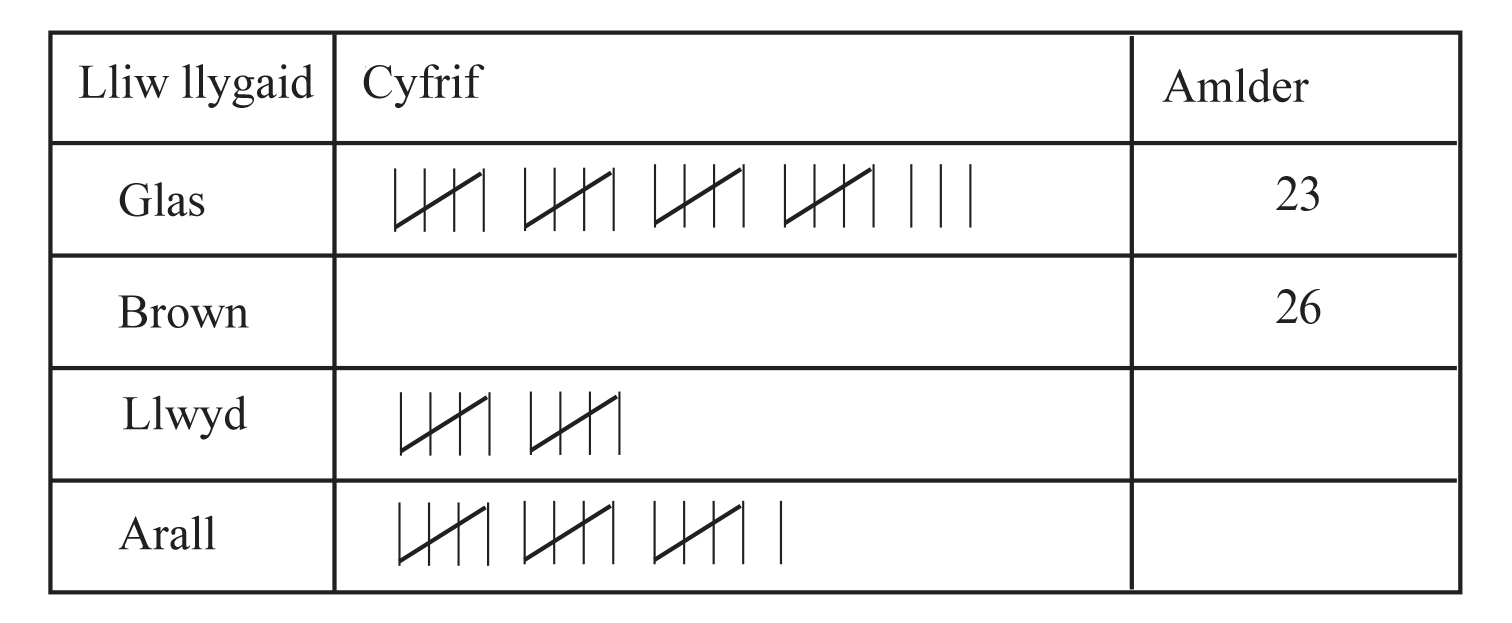
<style>
.page{position:relative;width:1512px;height:623px;background:#ffffff}
.page>*{position:absolute;margin:0}
.t1{font:48px "TimesNewRomanPSMT";color:#231f20}
</style>
<div class="page">
<p class="t1" style="left:79px;top:64px;width:235px;height:44px">Lliw llygaid</p>
<p class="t1" style="left:363px;top:64px;width:122px;height:44px">Cyfrif</p>
<p class="t1" style="left:1162px;top:68px;width:147px;height:35px">Amlder</p>
<p class="t1" style="left:119px;top:182px;width:86px;height:35px">Glas</p>
<p class="t1" style="left:118px;top:295px;width:131px;height:33px">Brown</p>
<p class="t1" style="left:123px;top:395px;width:125px;height:45px">Llwyd</p>
<p class="t1" style="left:118px;top:515px;width:98px;height:35px">Arall</p>
</div>
